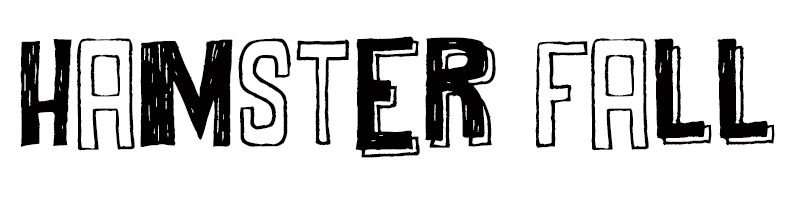
<style>
.page{position:relative;width:800px;height:200px;background:#ffffff}
.page>*{position:absolute;margin:0}
.t1{font:85px "MaybeMaybeNot";color:#020000}
</style>
<div class="page">
<p class="t1" style="left:20px;top:36px;width:755px;height:122px">hamster fall</p>
</div>
